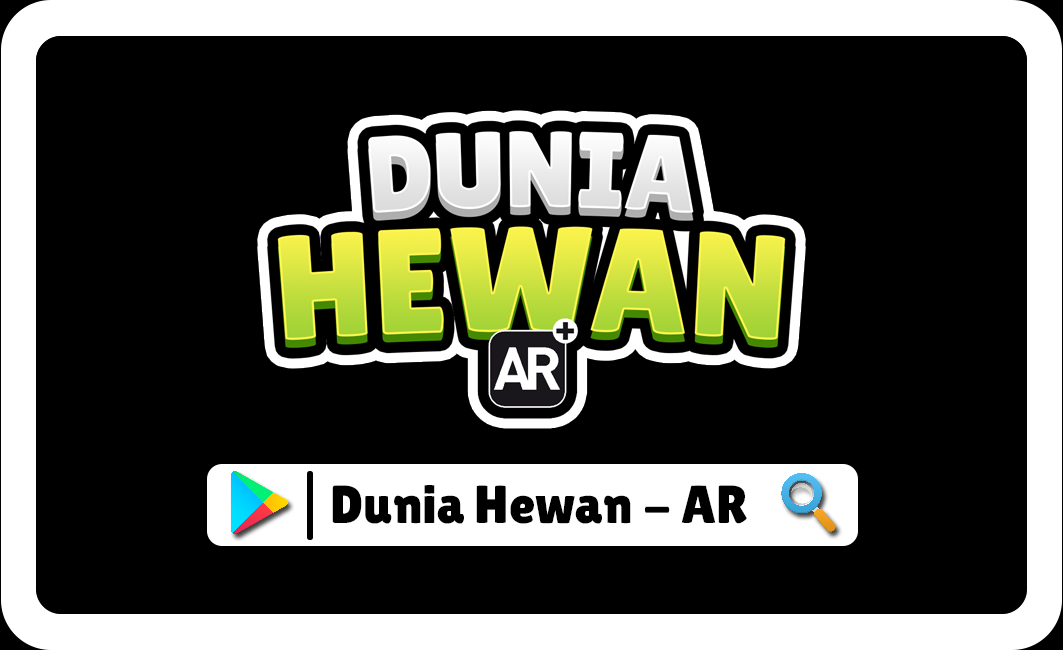
<style>
.page{position:relative;width:1063px;height:650px;background:#000000}
.page>*{position:absolute;margin:0}
.t1{font:53.6px "LilitaOne";color:#000000}
</style>
<div class="page">
<p class="t1" style="left:332px;top:485px;width:415px;height:39px">Dunia Hewan - AR</p>
</div>
